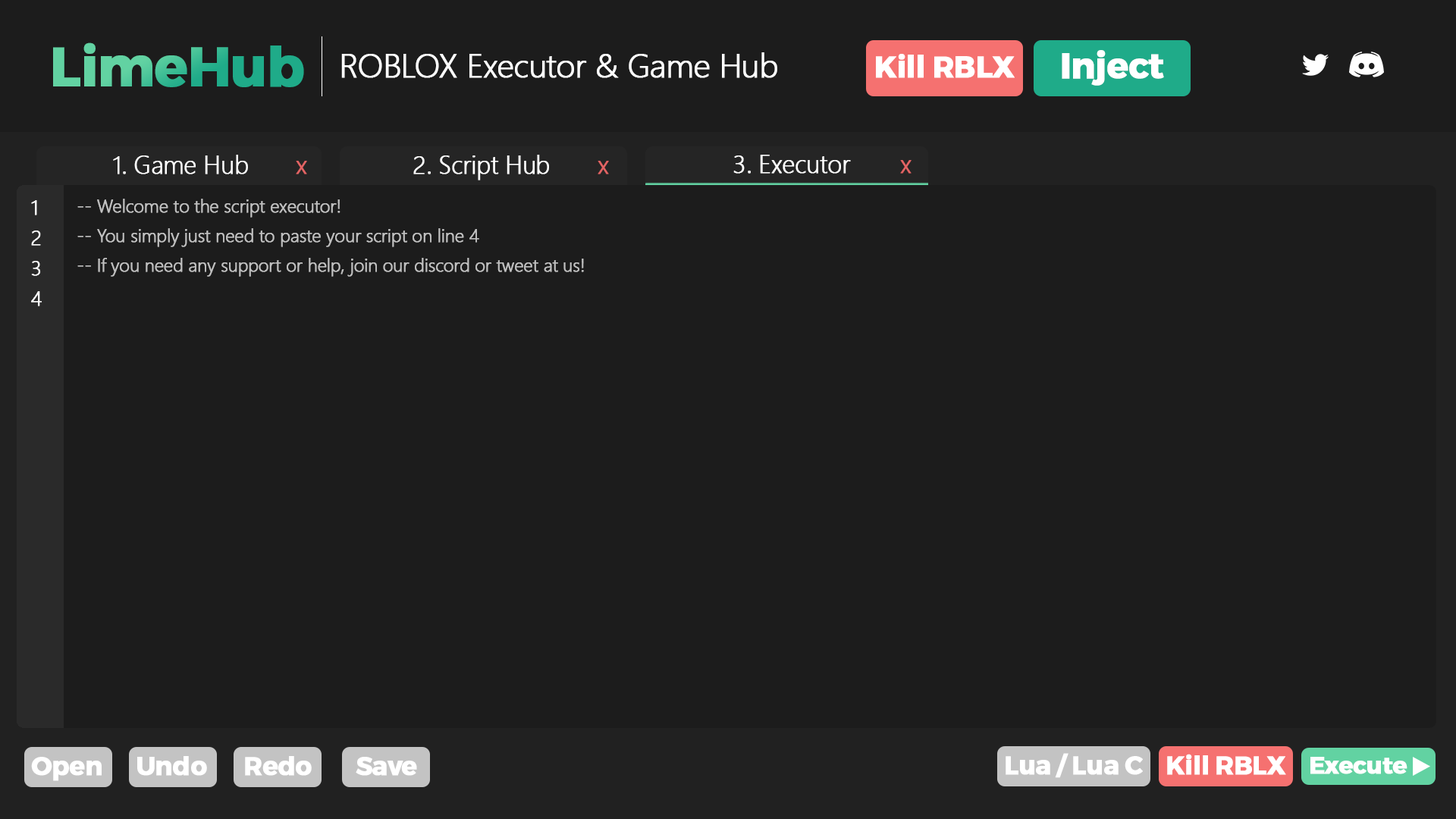
<style>
.page{position:relative;width:1456px;height:819px;background:#1c1c1c}
.page>*{position:absolute;margin:0}
.t1{font:54.6px "TruenoBd";letter-spacing:-0.025em;font-weight:bold}
.t2{font:33.1px "SegoeUI-Light";letter-spacing:-0.025em;color:#ffffff;font-weight:bold}
.t3{font:30px "TruenoBd";letter-spacing:-0.025em;color:#ffffff;font-weight:bold}
.t4{font:35.8px "TruenoBd";letter-spacing:-0.025em;color:#ffffff;font-weight:bold}
.t5{font:25.2px "SegoeUI-Light";letter-spacing:-0.025em;color:#ffffff;font-weight:bold}
.t6{font:25.5px "SegoeUI-Light";letter-spacing:-0.025em;color:#e36464;font-weight:bold}
.t7{font:25.3px "SegoeUI-Light";letter-spacing:-0.025em;color:#ffffff;font-weight:bold}
.t8{font:25.7px "SegoeUI-Light";letter-spacing:-0.025em;color:#e36464;font-weight:bold}
.t9{font:20.2px/30.3px "SegoeUI-Light";letter-spacing:-0.025em;color:#ffffff;font-weight:bold}
.t10{font:18.3px/29.7px "SegoeUI-Light";letter-spacing:-0.025em;color:#c1c1c1;font-weight:bold}
.t11{font:25.7px "TruenoBd";letter-spacing:-0.025em;color:#ffffff;font-weight:bold}
.t12{font:23.9px "TruenoBd";letter-spacing:-0.025em;color:#ffffff;font-weight:bold}
</style>
<div class="page">
<p class="t1" style="left:53px;top:42px;width:251px;height:45px">LimeHub</p>
<p class="t2" style="left:341px;top:52px;width:436px;height:26px">ROBLOX Executor &amp; Game Hub</p>
<p class="t3" style="left:876px;top:54px;width:139px;height:24px">Kill RBLX</p>
<p class="t4" style="left:1062px;top:50px;width:102px;height:36px">Inject</p>
<p class="t5" style="left:113px;top:155px;width:135px;height:19px">1. Game Hub</p>
<p class="t6" style="left:296px;top:161px;width:11px;height:13px">x</p>
<p class="t7" style="left:413px;top:155px;width:136px;height:25px">2. Script Hub</p>
<p class="t8" style="left:598px;top:161px;width:11px;height:13px">x</p>
<p class="t7" style="left:733px;top:155px;width:118px;height:19px">3. Executor</p>
<p class="t8" style="left:900px;top:160px;width:12px;height:14px">x</p>
<p class="t9" style="left:31px;top:200px;width:11px;height:106px">1<br>2<br>3<br>4</p>
<p class="t10" style="left:77px;top:199px;width:507px;height:78px">-- Welcome to the script executor!<br>-- You simply just need to paste your script on line 4<br>-- If you need any support or help, join our discord or tweet at us!</p>
<p class="t11" style="left:31px;top:757px;width:71px;height:24px">Open</p>
<p class="t11" style="left:137px;top:756px;width:70px;height:20px">Undo</p>
<p class="t11" style="left:245px;top:756px;width:67px;height:20px">Redo</p>
<p class="t11" style="left:356px;top:757px;width:61px;height:19px">Save</p>
<p class="t11" style="left:1006px;top:753px;width:137px;height:25px">Lua / Lua C</p>
<p class="t11" style="left:1167px;top:754px;width:119px;height:21px">Kill RBLX</p>
<p class="t12" style="left:1310px;top:757px;width:97px;height:17px">Execute</p>
</div>
